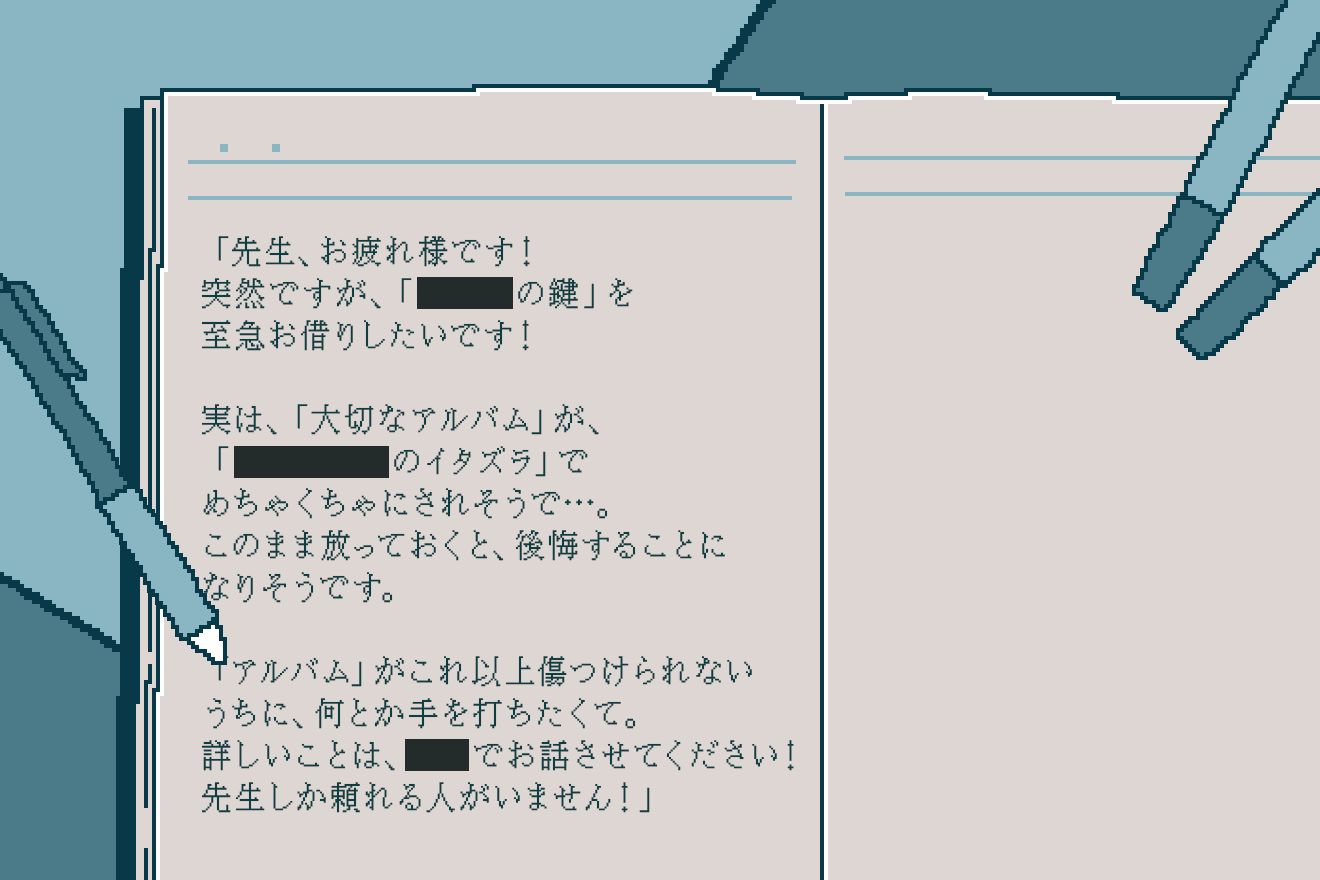
<style>
.page{position:relative;width:1320px;height:880px;background:#ded6d2}
.page>*{position:absolute;margin:0}
.t1{font:30px/42px "KH-Dot-kagurazaka-16";letter-spacing:0.14em;color:#083949}
</style>
<div class="page">
<p class="t1" style="left:202px;top:236px;width:592px;height:577px">「先生、お疲れ様です！<br>突然ですが、「資料室の鍵」を<br>至急お借りしたいです！<br><br>実は、「大切なアルバム」が、<br>「高樹と深川のイタズラ」で<br>めちゃくちゃにされそうで…。<br>このまま放っておくと、後悔することに<br>なりそうです。<br><br>「アルバム」がこれ以上傷つけられない<br>うちに、何とか手を打ちたくて。<br>詳しいことは、電話でお話させてください！<br>先生しか頼れる人がいません！」</p>
</div>
